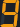
<style>
.page{position:relative;width:20px;height:27px;background:#1c1f26}
.page>*{position:absolute;margin:0}
.t1{font:42px "Digital-7MonoItalic";color:#f39c12}
</style>
<div class="page">
<p class="t1" style="left:0px;top:0px;width:20px;height:27px">8</p>
<p class="t1" style="left:0px;top:0px;width:20px;height:27px">9</p>
</div>
